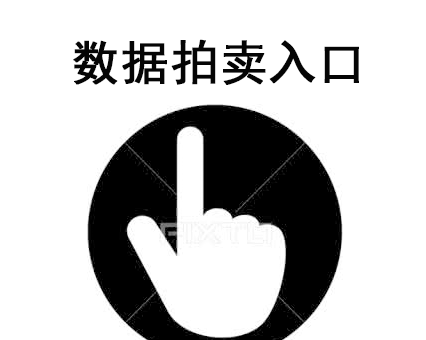
<style>
.page{position:relative;width:426px;height:340px;background:#ffffff}
.page>*{position:absolute;margin:0}
.t1{font:48px "SimHei";color:#050505;font-weight:bold}
</style>
<div class="page">
<p class="t1" style="left:73px;top:39px;width:286px;height:46px">数据拍卖入口</p>
</div>
